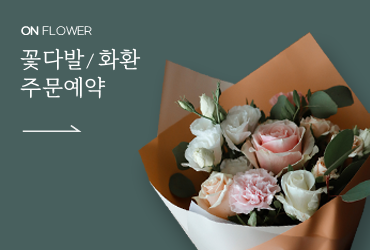
<style>
.page{position:relative;width:370px;height:250px;background:#48605e}
.page>*{position:absolute;margin:0}
.t1{font:10.4px "GmarketSansLight";color:#ffffff}
.t2{font:10.4px "GmarketSansMedium";color:#ffffff}
.t3{font:22.1px/28.2px "MaruBuriot-Regular";color:#ffffff}
.t4{font:14.8px/28.2px "MaruBuriot-Regular";letter-spacing:-0.1em;color:#ffffff}
</style>
<div class="page">
<p class="t1" style="left:21px;top:26px;width:71px;height:9px"><span class="t2">ON</span> FLOWER</p>
<p class="t3" style="left:20px;top:48px;width:121px;height:51px">꽃다발 <span class="t4">/ </span>화환<br>주문예약</p>
</div>
